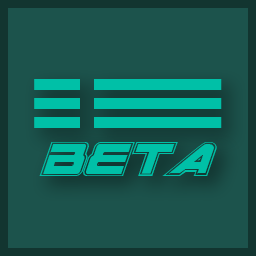
<style>
.page{position:relative;width:256px;height:256px;background:#1c534c}
.page>*{position:absolute;margin:0}
.t1{font:67.6px "SpaceRangerAcademyItalic";color:#00c0a7}
</style>
<div class="page">
<p class="t1" style="left:39px;top:142px;width:178px;height:34px">BETA</p>
</div>
